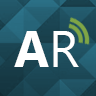
<style>
.page{position:relative;width:96px;height:96px}
.page>*{position:absolute;margin:0}
.t1{font:50.4px "NirmalaUI-Bold";color:#ffffff}
.t2{font:50.4px "NirmalaUI";color:#ffffff}
</style>
<div class="page">
<p class="t1" style="left:14px;top:31px;width:65px;height:36px">A<span class="t2">R</span></p>
</div>
